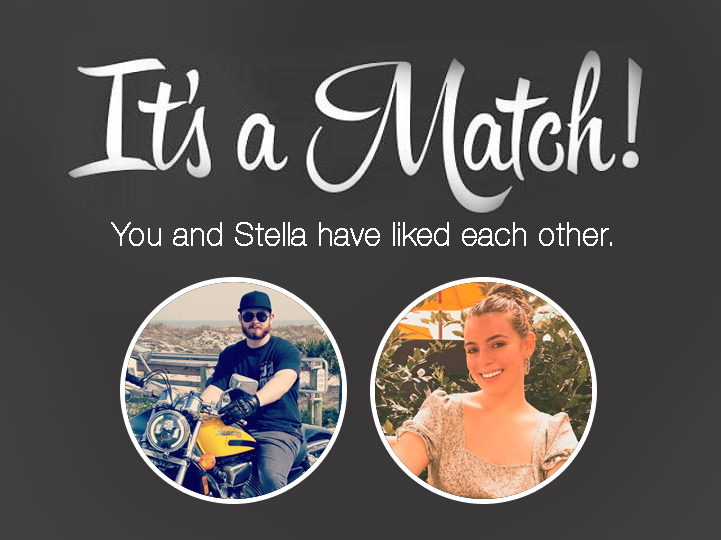
<style>
.page{position:relative;width:721px;height:540px}
.page>*{position:absolute;margin:0}
.t1{font:32px "HelveticaNeueLT-UltraLight";color:#ffffff;font-weight:bold}
</style>
<div class="page">
<p class="t1" style="left:111px;top:222px;width:501px;height:24px">You and Stella have liked each other.</p>
</div>
